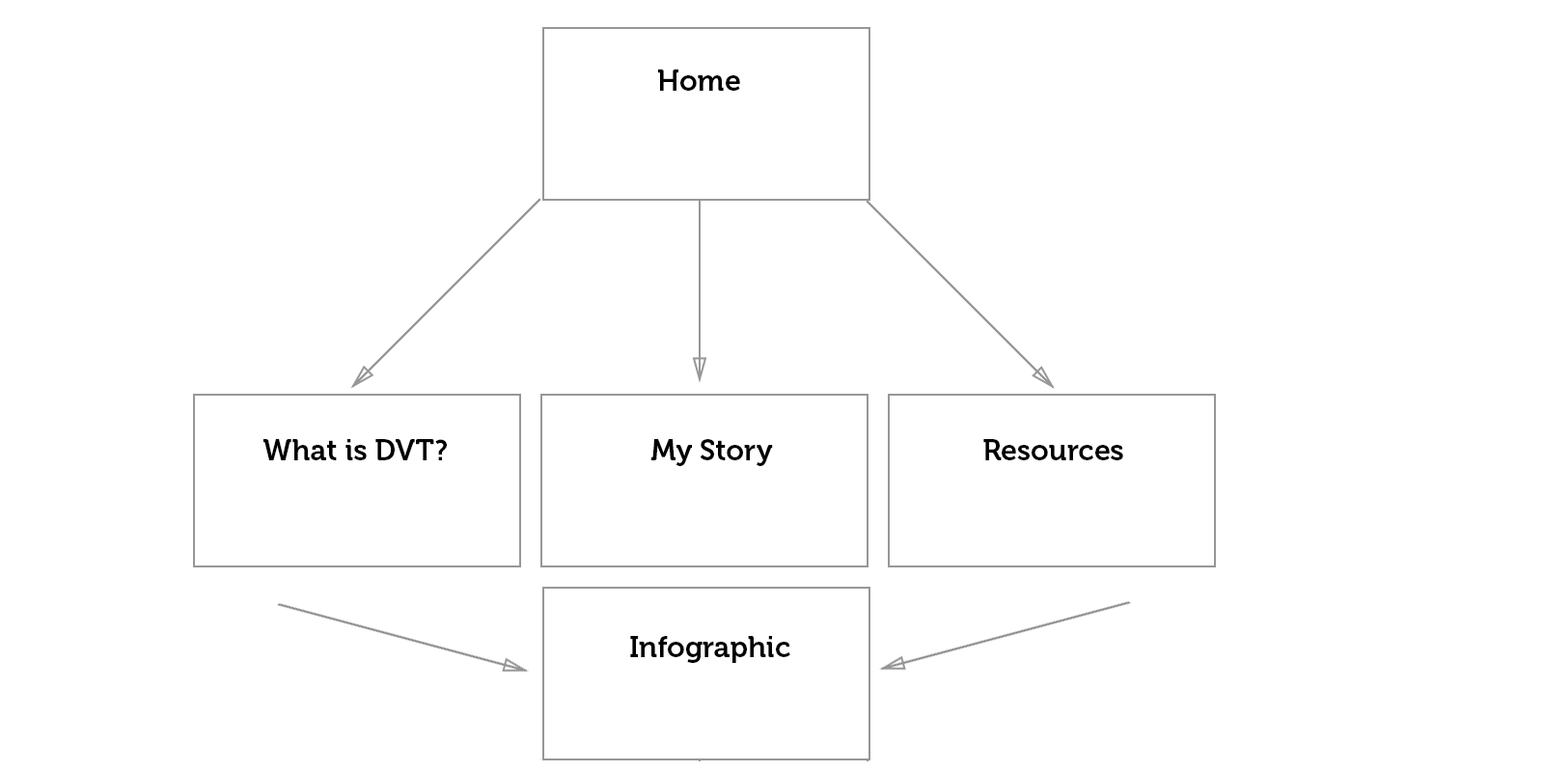
<style>
.page{position:relative;width:1544px;height:772px;background:#ffffff}
.page>*{position:absolute;margin:0}
.t1{font:29px "Museo-700";color:#000000}
</style>
<div class="page">
<p class="t1" style="left:658px;top:69px;width:82px;height:22px">Home</p>
<p class="t1" style="left:263px;top:439px;width:184px;height:21px">What is DVT?</p>
<p class="t1" style="left:652px;top:439px;width:121px;height:27px">My Story</p>
<p class="t1" style="left:984px;top:439px;width:139px;height:21px">Resources</p>
<p class="t1" style="left:630px;top:636px;width:160px;height:27px">Infographic</p>
</div>
